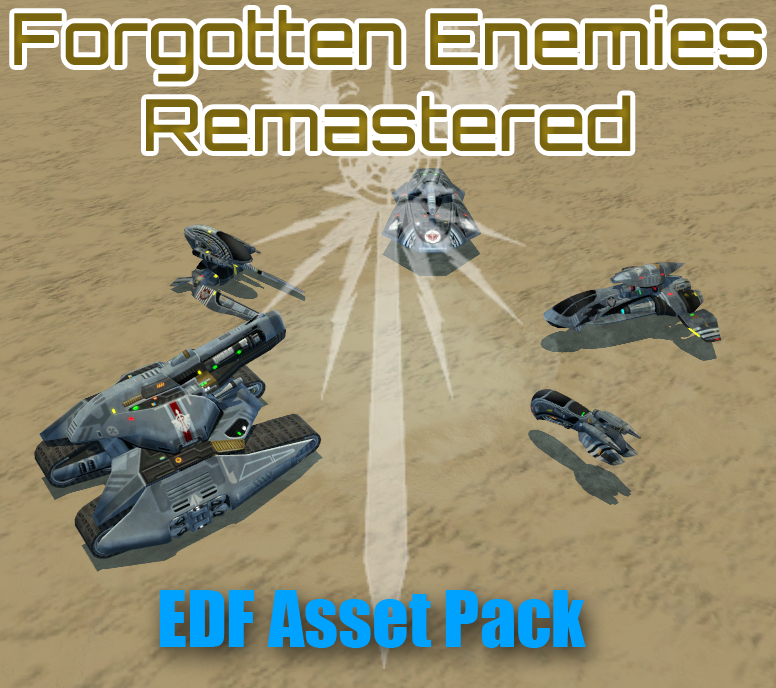
<style>
.page{position:relative;width:776px;height:688px}
.page>*{position:absolute;margin:0}
.t1{font:72px "Orbitron-Medium";color:#78640f}
.t2{font:72px "Impact";color:#00a2ff}
</style>
<div class="page">
<p class="t1" style="left:14px;top:9px;width:748px;height:142px;text-align:center">Forgotten Enemies<br>Remastered</p>
<p class="t2" style="left:159px;top:590px;width:427px;height:58px">EDF Asset Pack</p>
</div>
